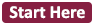
<style>
.page{position:relative;width:94px;height:25px;background:#861f41}
.page>*{position:absolute;margin:0}
.t1{font:18px "Calibri-Bold";color:#ffffff}
</style>
<div class="page">
<p class="t1" style="left:9px;top:6px;width:76px;height:13px">Start Here</p>
</div>
